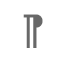
<style>
.page{position:relative;width:64px;height:64px;background:#ffffff}
.page>*{position:absolute;margin:0}
.t1{font:48px "SegoeWP-Semibold";color:#686868}
</style>
<div class="page">
<p class="t1" style="left:23px;top:14px;width:20px;height:34px;rotate:180deg">¶</p>
</div>
